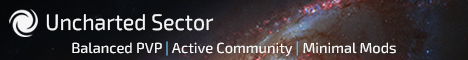
<style>
.page{position:relative;width:468px;height:60px}
.page>*{position:absolute;margin:0}
.t1{font:22.5px "Exo2-Regular";color:#f5f5f5;scale:0.94 1}
.t2{font:14.6px "Exo2-Medium";color:#f6f6f6}
.t3{font:14.6px "Exo2-Medium";color:#76c4ec}
</style>
<div class="page">
<p class="t1" style="left:46px;top:14px;width:168px;height:17px">Uncharted Sector</p>
<p class="t2" style="left:72px;top:41px;width:324px;height:15px;text-align:center">Balanced PVP <span class="t3">| </span>Active Community <span class="t3">| </span>Minimal Mods<br>New Player Friendly<br>No PCU Limits</p>
</div>
